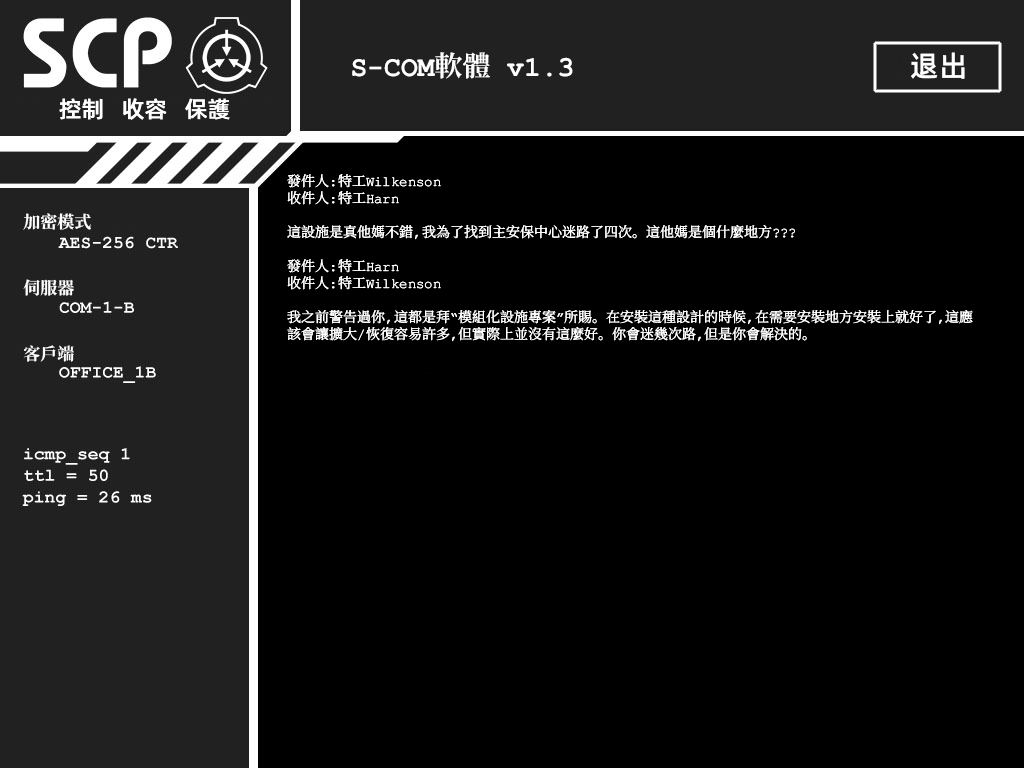
<style>
.page{position:relative;width:1024px;height:768px;background:#000000}
.page>*{position:absolute;margin:0}
.t1{font:28px "ContainmentBreach-Bold";color:#ffffff}
.t2{font:29px "AlibabaPuHuiTiM";color:#ffffff}
.t3{font:23px "AlibabaPuHuiTiM";color:#ffffff}
.t4{font:14px/17px "ContainmentBreach-Regular";color:#ffffff}
.t5{font:17px/16.5px "ContainmentBreach-Bold";color:#ffffff}
</style>
<div class="page">
<p class="t1" style="left:352px;top:52px;width:221px;height:27px">S-COM軟體 v1.3</p>
<p class="t2" style="left:911px;top:52px;width:54px;height:27px">退出</p>
<p class="t3" style="left:59px;top:98px;width:171px;height:22px">控制   收容   保護</p>
<p class="t4" style="left:287px;top:174px;width:686px;height:168px">發件人：特工Wilkenson<br>收件人：特工Harn<br><br>這設施是真他媽不錯，我為了找到主安保中心迷路了四次。這他媽是個什麼地方？？？<br><br>發件人：特工Harn<br>收件人：特工Wilkenson<br><br>我之前警告過你，這都是拜“模組化設施專案”所賜。在安裝這種設計的時候，在需要安裝地方安裝上就好了，這應<br>該會讓擴大/恢復容易許多，但實際上並沒有這麼好。你會迷幾次路，但是你會解決的。</p>
<p class="t5" style="left:23px;top:213px;width:68px;height:149px">加密模式<br><br><br><br>伺服器<br><br><br><br>客戶端</p>
</div>
